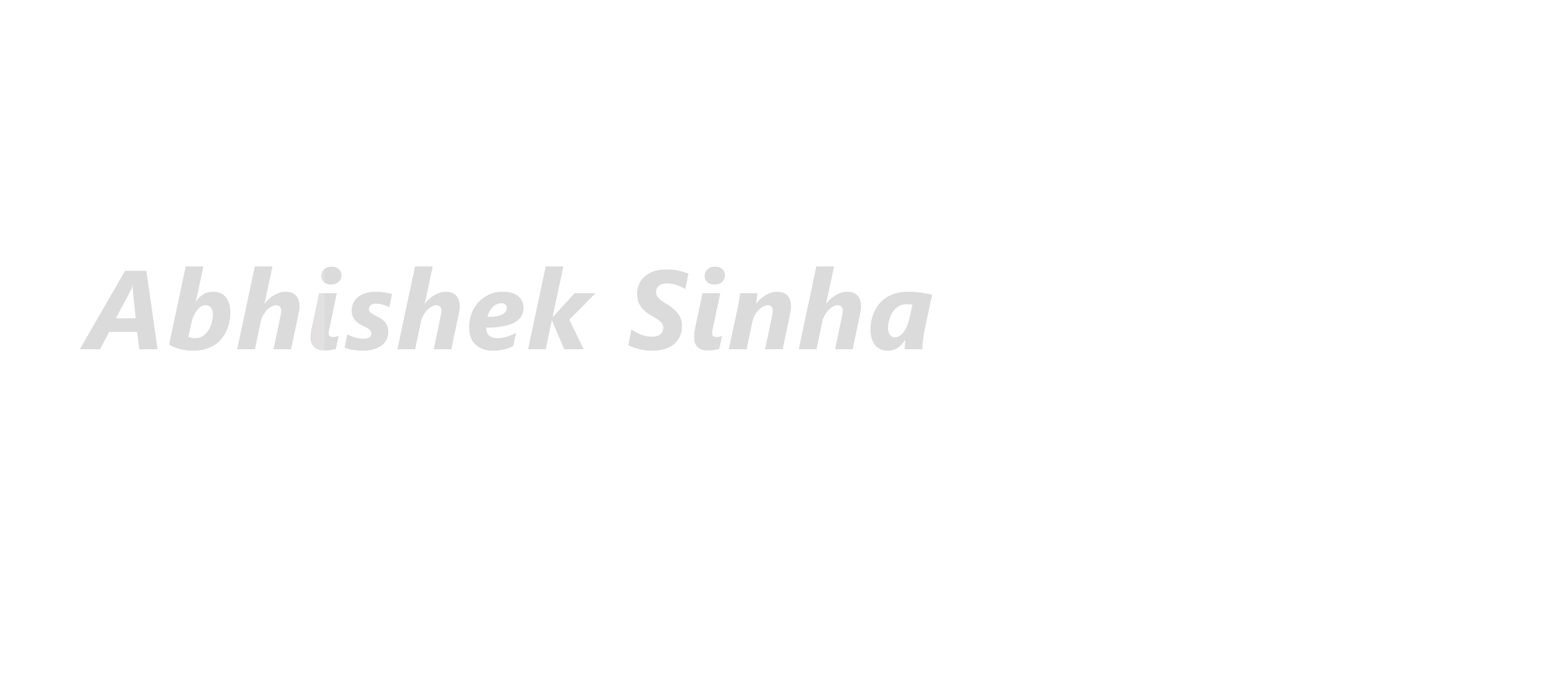
<style>
.page{position:relative;width:1568px;height:700px;background:#ffffff}
.page>*{position:absolute;margin:0}
.t1{font:112px "SegoeUI-BoldItalic";letter-spacing:0.025em;color:#c8c6c6}
</style>
<div class="page">
<p class="t1" style="left:79px;top:266px;width:854px;height:85px;opacity:0.64">Abhishek Sinha</p>
</div>
